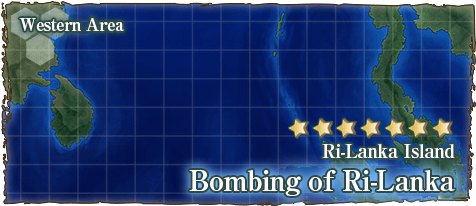
<style>
.page{position:relative;width:476px;height:206px}
.page>*{position:absolute;margin:0}
.t1{font:17px "RyuminPro-ExBold";letter-spacing:-0.04em;color:#ffffff}
.t2{font:19px "RyuminPro-ExBold";letter-spacing:-0.04em;color:#ffffff}
.t3{font:28px "RyuminPro-ExBold";letter-spacing:-0.04em;color:#ffffff}
</style>
<div class="page">
<p class="t1" style="left:19px;top:18px;width:105px;height:14px">Western Area</p>
<p class="t2" style="left:322px;top:144px;width:133px;height:15px">Ri-Lanka Island</p>
<p class="t3" style="left:189px;top:170px;width:266px;height:26px">Bombing of Ri-Lanka</p>
</div>
